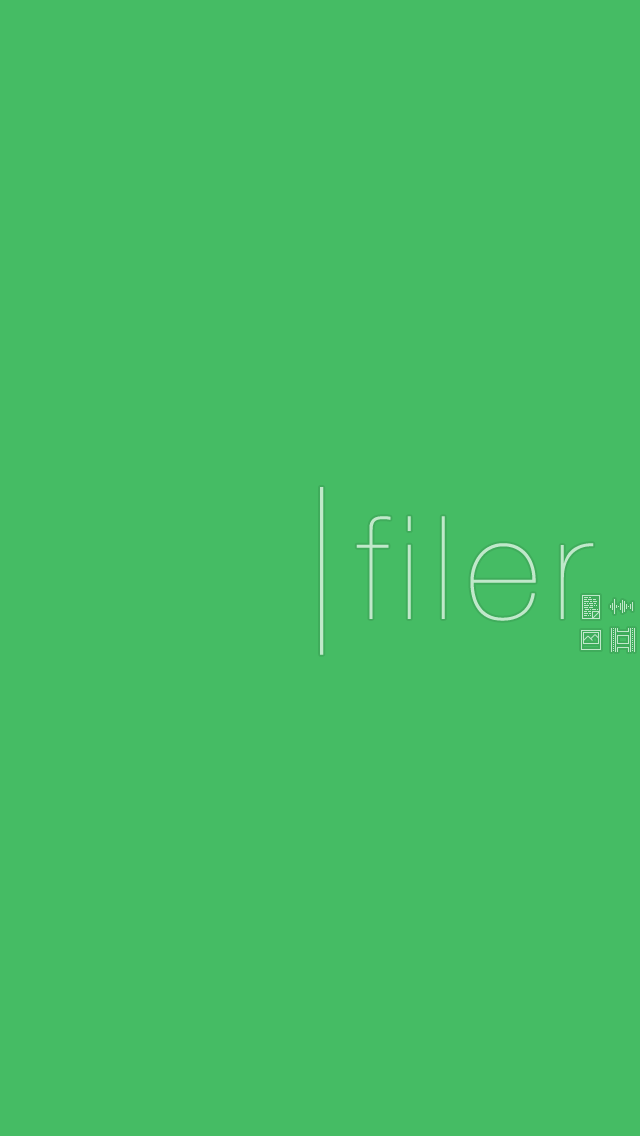
<style>
.page{position:relative;width:640px;height:1136px;background:#45bc64}
.page>*{position:absolute;margin:0}
.t1{font:144px "HelveticaNeue-UltraLight";letter-spacing:0.1em;color:#c0e8ca}
.t2{font:168px "HelveticaNeue-UltraLight";letter-spacing:0.1em;color:#c0e8ca}
</style>
<div class="page">
<p class="t1" style="left:320px;top:487px;width:274px;height:168px"><span class="t2">|</span>filer</p>
</div>
